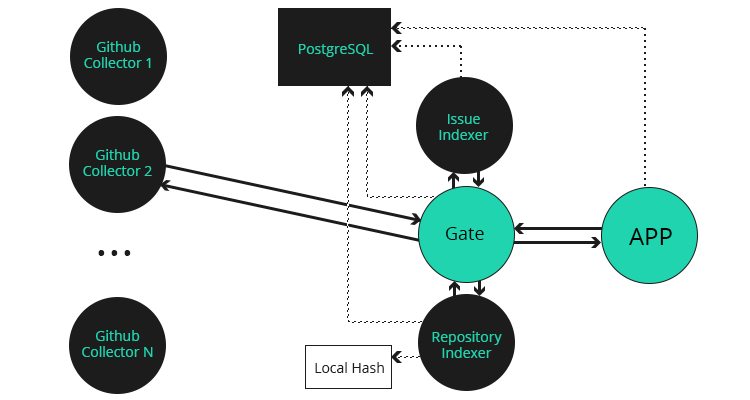
<style>
.page{position:relative;width:750px;height:400px;background:#ffffff}
.page>*{position:absolute;margin:0}
.t1{font:14px "OpenSans-Regular";color:#1fd4af}
.t2{font:18px "OpenSans-Regular";color:#000000}
.t3{font:24px "OpenSans-Regular";color:#000000}
.t4{font:48px "OpenSans-Regular";color:#1c1c1c}
.t5{font:14px "OpenSans-Regular";color:#1c1c1c}
</style>
<div class="page">
<p class="t1" style="left:84px;top:41px;width:67px;height:27px;text-align:center">Github<br>Collector 1</p>
<p class="t1" style="left:299px;top:44px;width:75px;height:13px">PostgreSQL</p>
<p class="t1" style="left:439px;top:114px;width:50px;height:26px;text-align:center">Issue<br>Indexer</p>
<p class="t1" style="left:83px;top:149px;width:69px;height:27px;text-align:center">Github<br>Collector 2</p>
<p class="t2" style="left:446px;top:227px;width:38px;height:13px">Gate</p>
<p class="t3" style="left:629px;top:228px;width:43px;height:17px">APP</p>
<p class="t4" style="left:98px;top:250px;width:33px;height:6px">...</p>
<p class="t1" style="left:82px;top:330px;width:71px;height:27px;text-align:center">Github<br>Collector N</p>
<p class="t1" style="left:432px;top:331px;width:70px;height:27px;text-align:center">Repository<br>Indexer</p>
<p class="t5" style="left:315px;top:362px;width:69px;height:11px">Local Hash</p>
</div>
